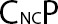
<style>
.page{position:relative;width:58px;height:24px;background:#ffffff}
.page>*{position:absolute;margin:0}
.t1{font:17.5px "MyriadPro-Regular";color:#000000}
.t2{font:35px "MyriadPro-Regular";color:#000000}
</style>
<div class="page">
<p class="t1" style="left:0px;top:0px;width:58px;height:24px"><span class="t2">C</span>NC<span class="t2">P</span></p>
</div>
